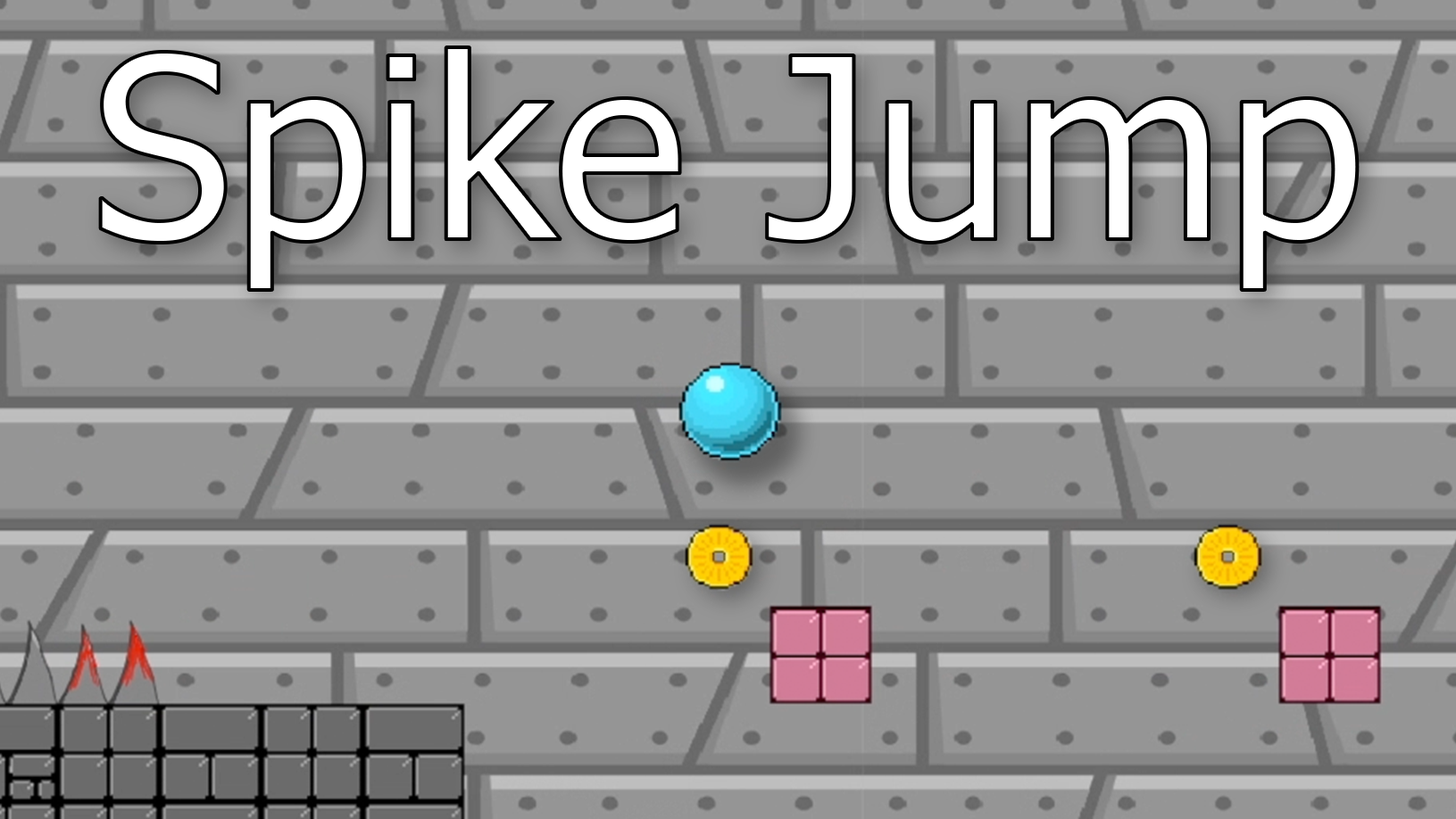
<style>
.page{position:relative;width:1456px;height:819px;background:#959595}
.page>*{position:absolute;margin:0}
.t1{font:252.9px "Tahoma";color:#ffffff}
</style>
<div class="page">
<p class="t1" style="left:100px;top:47px;width:1257px;height:243px">Spike Jump</p>
</div>
